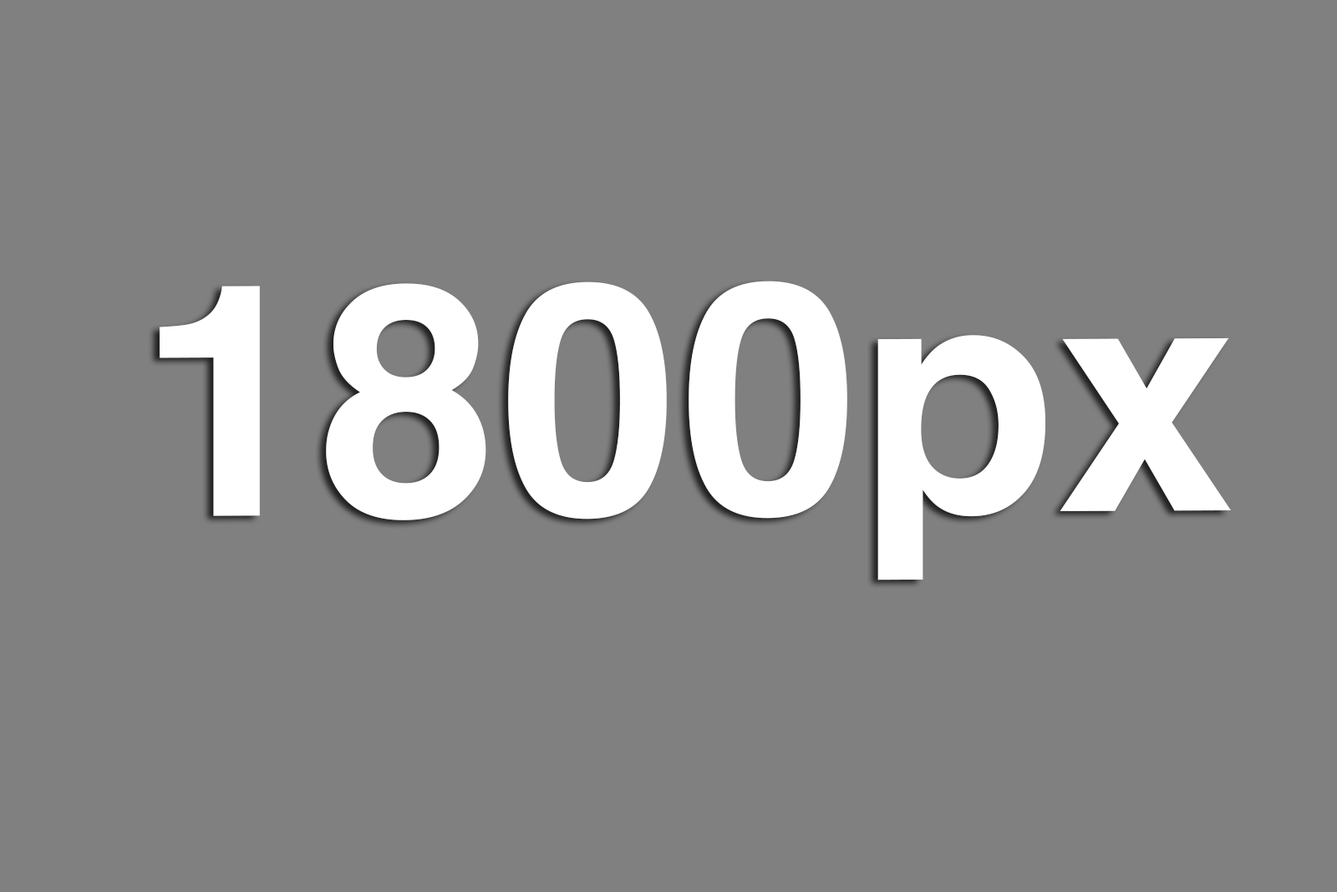
<style>
.page{position:relative;width:1337px;height:892px;background:#808080}
.page>*{position:absolute;margin:0}
.t1{font:324.1px "Helvetica-Bold";color:#ffffff}
</style>
<div class="page">
<p class="t1" style="left:160px;top:281px;width:1070px;height:300px">1800px</p>
</div>
